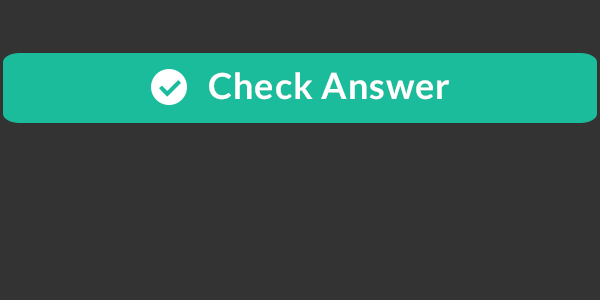
<style>
.page{position:relative;width:600px;height:300px;background:#333333}
.page>*{position:absolute;margin:0}
.t1{font:36px "Lato-Bold";letter-spacing:0.025em;color:#ffffff}
</style>
<div class="page">
<p class="t1" style="left:209px;top:72px;width:241px;height:28px">Check Answer</p>
</div>
